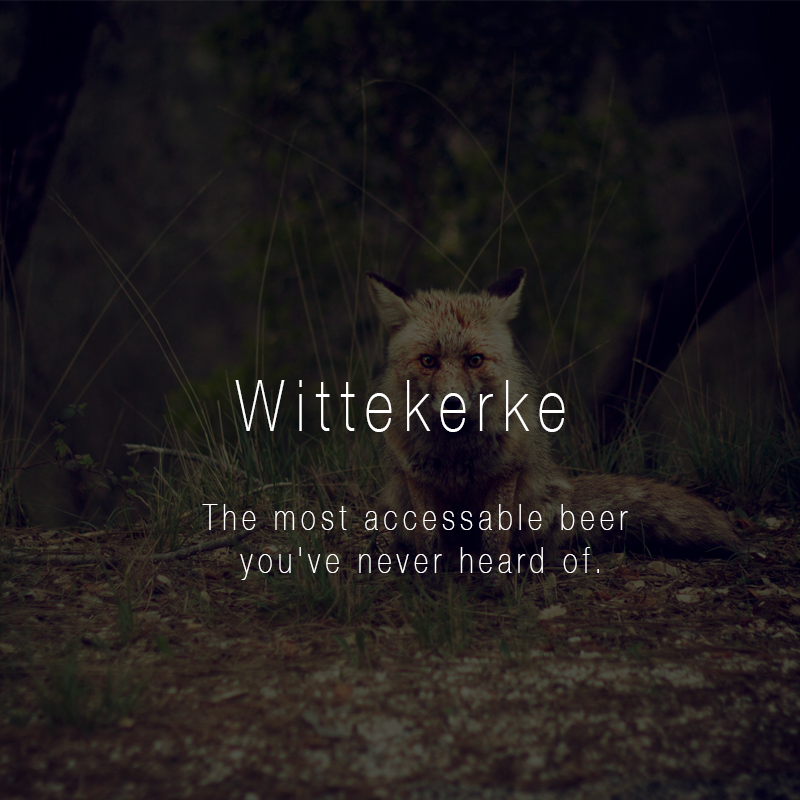
<style>
.page{position:relative;width:800px;height:800px}
.page>*{position:absolute;margin:0}
.t1{font:72px "HelveticaNeue-Thin";letter-spacing:0.2em;color:#ffffff;scale:0.75 1}
.t2{font:36px "HelveticaNeue-Thin";letter-spacing:0.2em;color:#ffffff;scale:0.75 1}
</style>
<div class="page">
<p class="t1" style="left:235px;top:380px;width:330px;height:52px">Wittekerke</p>
<p class="t2" style="left:202px;top:504px;width:426px;height:76px;text-align:center">The most accessable beer<br> you've never heard of.</p>
</div>
